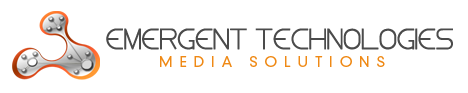
<style>
.page{position:relative;width:468px;height:93px;background:#ffffff}
.page>*{position:absolute;margin:0}
.t1{font:24px "Steiner";color:#4b4b4b;text-transform:uppercase;font-weight:bold}
.t2{font:14px "DINNeuzeitGroteskStd-Light";letter-spacing:0.5em;color:#ef8915;text-transform:uppercase}
</style>
<div class="page">
<p class="t1" style="left:106px;top:28px;width:347px;height:22px">Emergent tECHNOLOGIES</p>
<p class="t2" style="left:160px;top:56px;width:225px;height:11px">Media Solutions</p>
</div>
